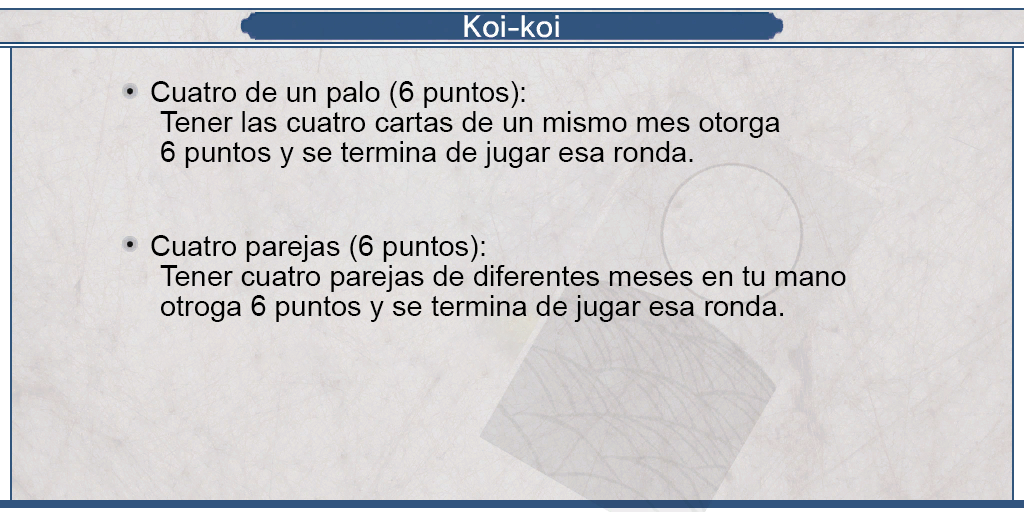
<style>
.page{position:relative;width:1024px;height:512px}
.page>*{position:absolute;margin:0}
.t1{font:29px "ArialMT";color:#000000}
.t2{font:29px/30px "ArialMT";color:#000000}
</style>
<div class="page">
<p class="t1" style="left:151px;top:81px;width:374px;height:27px">Cuatro de un palo (6 puntos):</p>
<p class="t2" style="left:160px;top:111px;width:620px;height:57px;text-align:justify">Tener las cuatro cartas de un mismo mes otorga <br>6 puntos y se termina de jugar esa ronda.</p>
<p class="t1" style="left:151px;top:235px;width:334px;height:27px">Cuatro parejas (6 puntos):</p>
<p class="t2" style="left:160px;top:265px;width:686px;height:57px;text-align:justify">Tener cuatro parejas de diferentes meses en tu mano <br>otroga 6 puntos y se termina de jugar esa ronda.</p>
</div>
